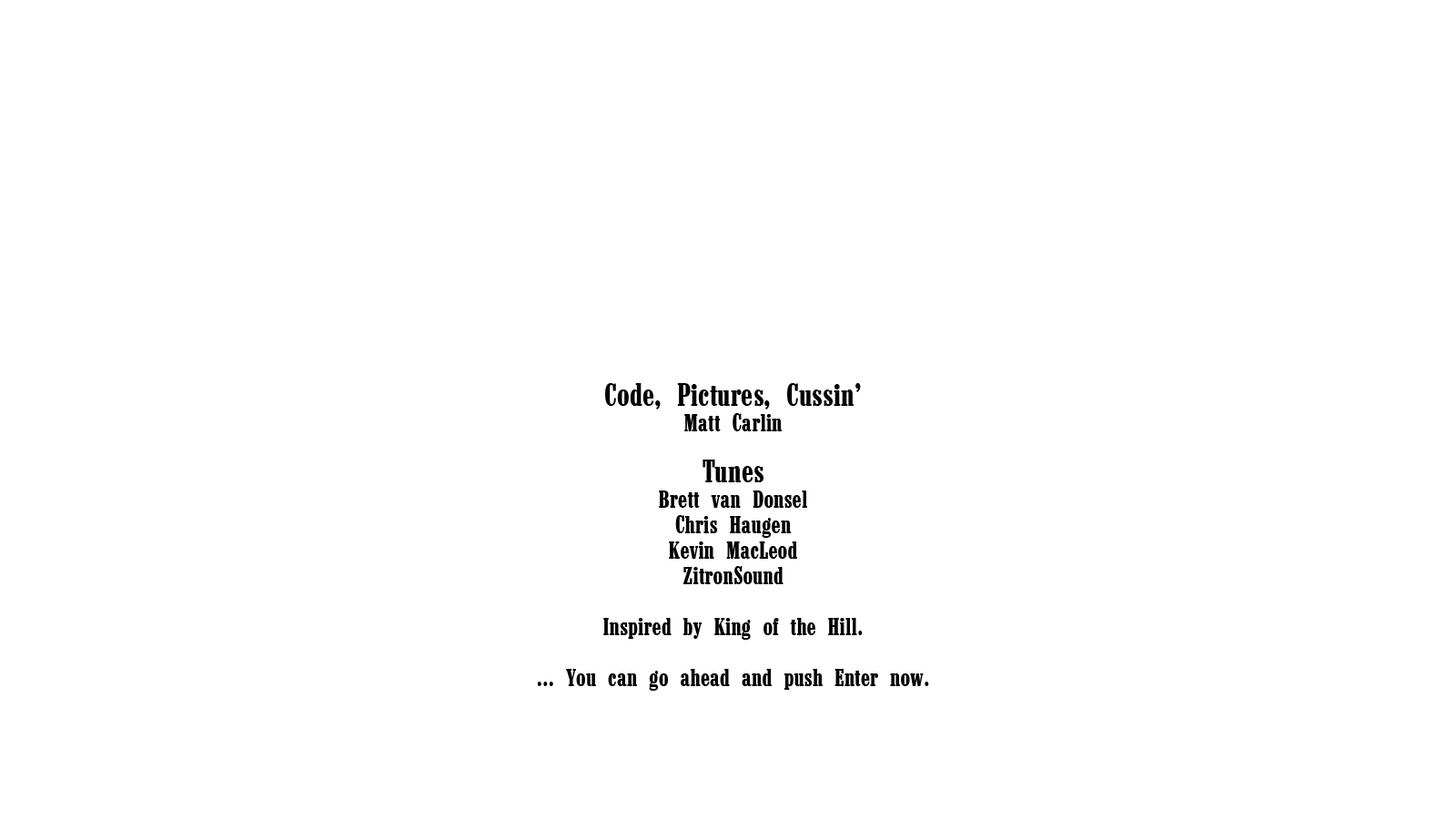
<style>
.page{position:relative;width:1456px;height:819px;background:#ffffff}
.page>*{position:absolute;margin:0}
.t1{font:25.5px/25.5px "Marlboro";color:#000000}
.t2{font:32.8px/25.5px "Marlboro";color:#000000}
</style>
<div class="page">
<p class="t1" style="left:537px;top:383px;width:392px;height:308px;text-align:center"><span class="t2">Code, Pictures, Cussin’<br></span>Matt Carlin<br><br><span class="t2">Tunes<br></span>Brett van Donsel<br>Chris Haugen<br>Kevin MacLeod<br>ZitronSound<br><br>Inspired by King of the Hill.<br><br>... You can go ahead and push Enter now.</p>
</div>
